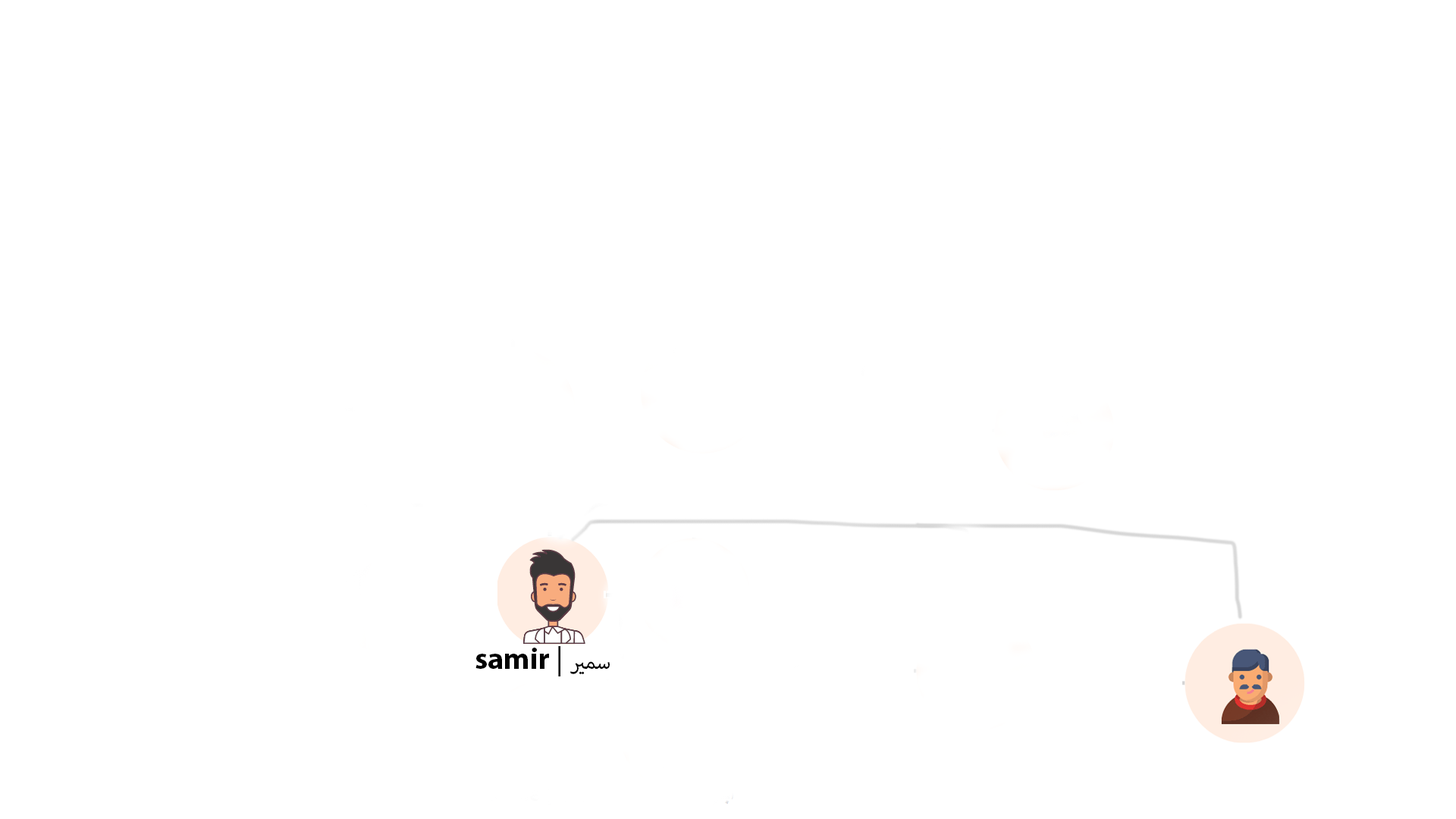
<style>
.page{position:relative;width:1456px;height:819px;background:#ffffff}
.page>*{position:absolute;margin:0}
.t1{font:30.3px "MyriadPro-Bold";color:#000000}
.t2{font:30.3px "MyriadPro-Regular";color:#000000}
.t3{font:30.3px "MyriadArabic-Regular";color:#000000}
</style>
<div class="page">
<p class="t1" style="left:475px;top:646px;width:135px;height:30px">samir <span class="t2">| </span><span class="t3">سمير</span></p>
</div>
